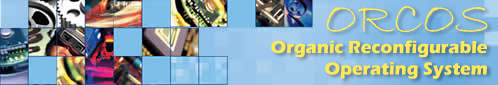
<style>
.page{position:relative;width:498px;height:85px}
.page>*{position:absolute;margin:0}
.t1{font:48px "BradleyHandITC";color:#fde857}
.t2{font:18px "ErasITC-Bold";color:#fde857}
</style>
<div class="page">
<p class="t1" style="left:326px;top:6px;width:162px;height:27px">ORCOS</p>
<p class="t2" style="left:271px;top:40px;width:216px;height:39px;text-align:right">Organic Reconfigurable<br>Operating System</p>
</div>
